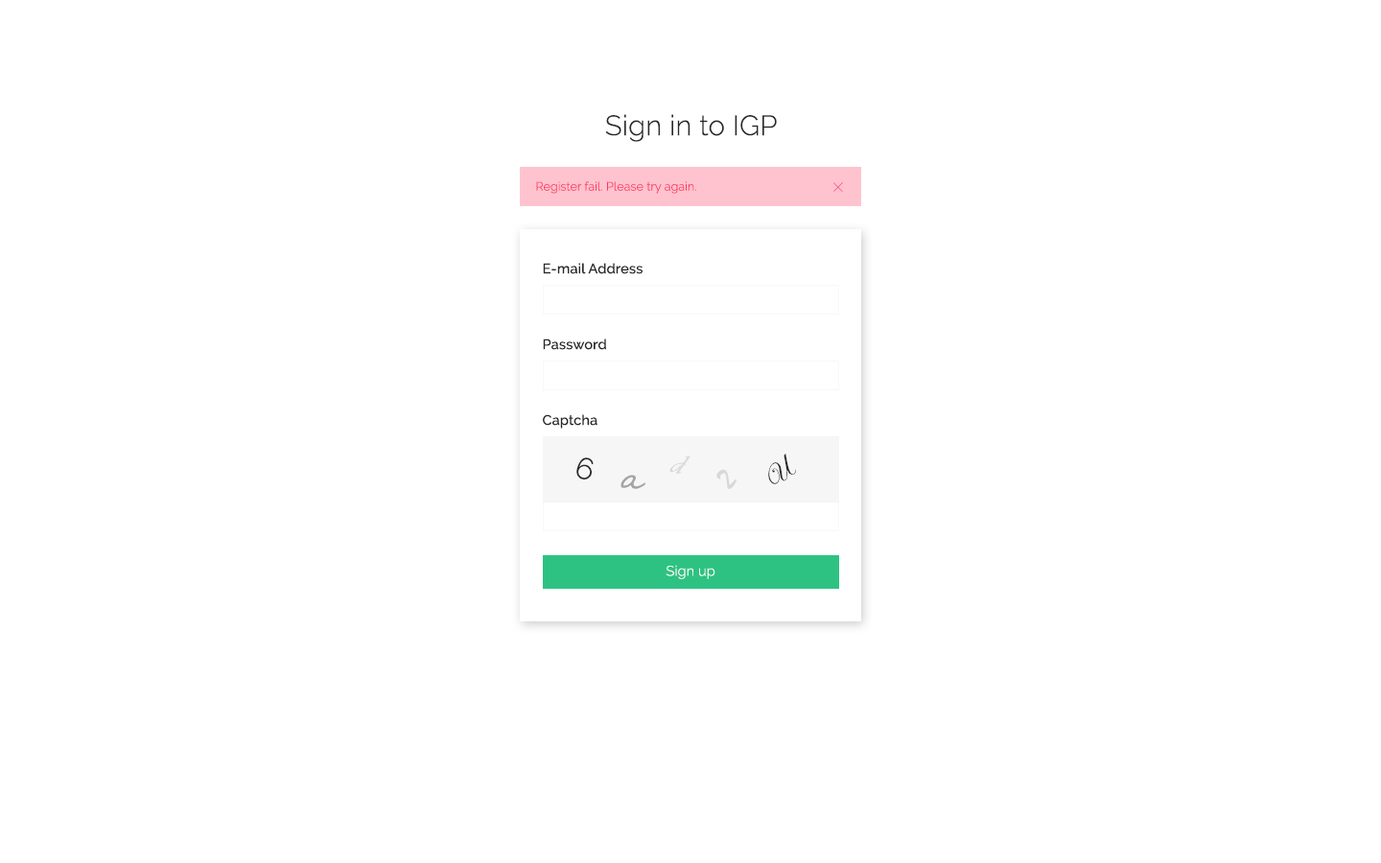
<style>
.page{position:relative;width:1381px;height:863px;background:#ffffff}
.page>*{position:absolute;margin:0}
.t1{font:28px "Raleway-Light";letter-spacing:0.01em;color:#282828}
.t2{font:12px "Raleway-Light";letter-spacing:0.01em;color:#ff3860}
.t3{font:14px "Raleway-Medium";letter-spacing:0.01em;color:#282828}
.t4{font:30px "Raleway-Light";letter-spacing:0.01em;color:#282828}
.t5{font:30px "Vivaldii";letter-spacing:0.01em;color:#d8d8d8}
.t6{font:30px "EdwardianScriptITC";letter-spacing:0.01em;color:#282828}
.t7{font:30px "Mistral";letter-spacing:0.01em;color:#d8d8d8}
.t8{font:30px "SegoeScript";letter-spacing:0.01em;color:#a4a4a4}
.t9{font:14px "Raleway-Light";letter-spacing:0.01em;color:#ffffff}
</style>
<div class="page">
<p class="t1" style="left:605px;top:114px;width:172px;height:28px">Sign in to IGP</p>
<p class="t2" style="left:536px;top:181px;width:160px;height:13px">Register fail. Please try again.</p>
<p class="t3" style="left:543px;top:263px;width:100px;height:11px">E-mail Address</p>
<p class="t3" style="left:543px;top:339px;width:63px;height:11px">Password</p>
<p class="t3" style="left:543px;top:414px;width:55px;height:15px">Captcha</p>
<p class="t4" style="left:576px;top:458px;width:18px;height:22px;rotate:15deg">6</p>
<p class="t5" style="left:670px;top:456px;width:21px;height:18px;rotate:15deg">d</p>
<p class="t6" style="left:768px;top:454px;width:28px;height:30px;rotate:-45deg">U</p>
<p class="t7" style="left:717px;top:469px;width:20px;height:20px;rotate:-45deg">2</p>
<p class="t8" style="left:621px;top:475px;width:25px;height:14px;rotate:15deg">a</p>
<p class="t9" style="left:666px;top:565px;width:50px;height:14px">Sign up</p>
</div>
